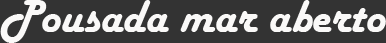
<style>
.page{position:relative;width:386px;height:43px;background:#333333}
.page>*{position:absolute;margin:0}
.t1{font:48px "HarlowSolid";color:#faf9f8}
</style>
<div class="page">
<p class="t1" style="left:0px;top:0px;width:386px;height:43px">Pousada mar aberto</p>
</div>
